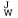
<style>
.page{position:relative;width:18px;height:18px;background:#ffffff}
.page>*{position:absolute;margin:0}
.t1{font:9px/7.6px "RobotoSlab-Light";color:#000000}
</style>
<div class="page">
<p class="t1" style="left:3px;top:1px;width:10px;height:16px">J<br>W</p>
</div>
